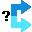
<style>
.page{position:relative;width:32px;height:32px;background:#ffffff}
.page>*{position:absolute;margin:0}
.t1{font:14px "DTahoma-Bold";color:#000000;font-weight:bold}
</style>
<div class="page">
<p class="t1" style="left:2px;top:11px;width:8px;height:10px">?</p>
</div>
